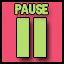
<style>
.page{position:relative;width:64px;height:64px;background:#f04f72}
.page>*{position:absolute;margin:0}
.t1{font:8.5px "AldivaroStampDemo-Stamp";color:#b4df6c}
</style>
<div class="page">
<p class="t1" style="left:14px;top:4px;width:34px;height:11px">pause</p>
</div>
